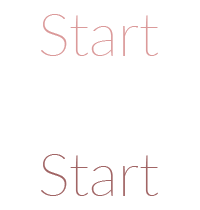
<style>
.page{position:relative;width:200px;height:210px;background:#ffffff}
.page>*{position:absolute;margin:0}
.t1{font:60px "Lato-Thin";color:#db9a9a}
.t2{font:60px "Lato-Thin";color:#a16565}
</style>
<div class="page">
<p class="t1" style="left:41px;top:14px;width:117px;height:42px">Start</p>
<p class="t2" style="left:41px;top:154px;width:117px;height:42px">Start</p>
</div>
